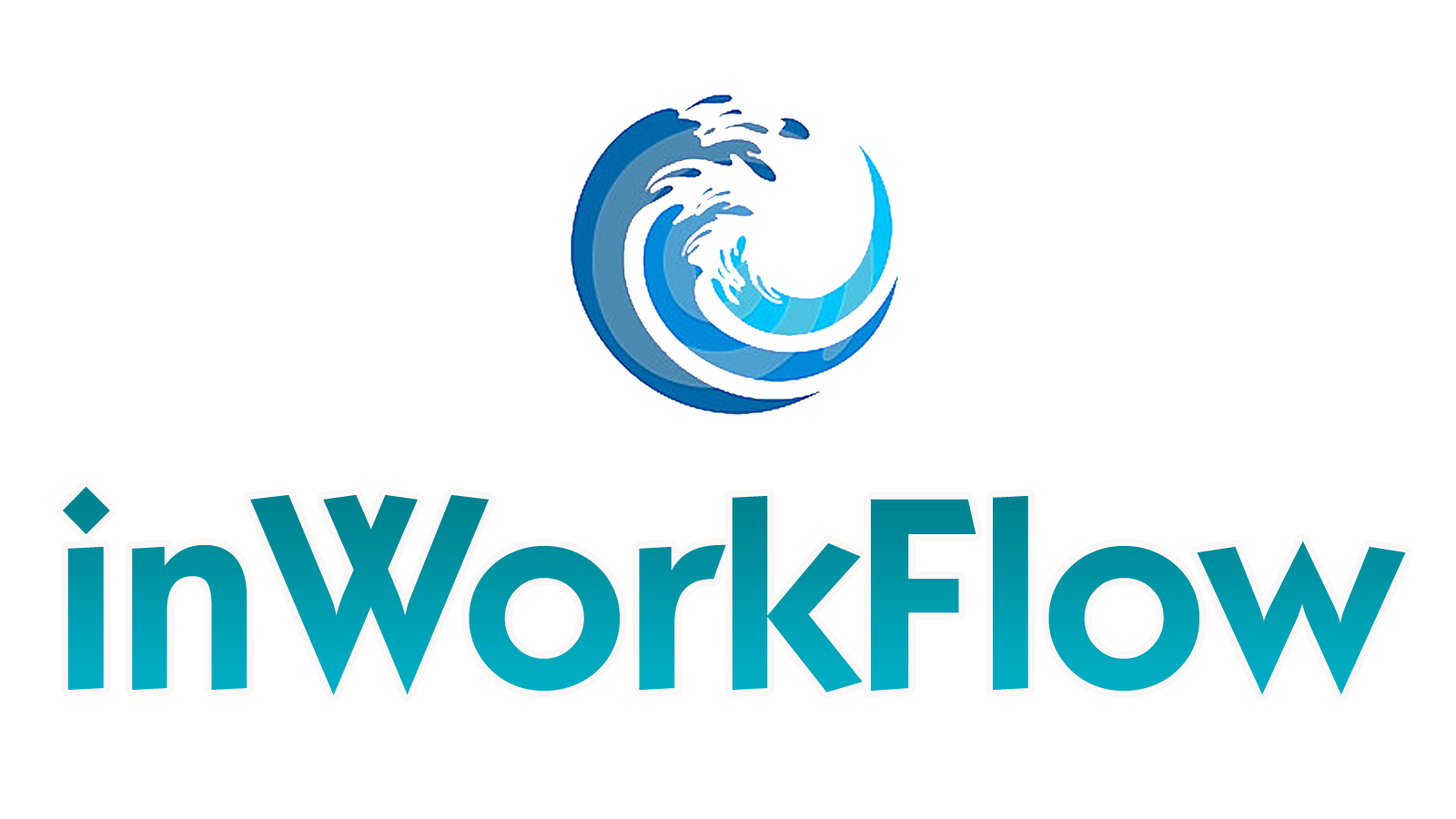
<style>
.page{position:relative;width:1456px;height:819px;background:#ffffff}
.page>*{position:absolute;margin:0}
.t1{font:273px "KabelITCbyBT-Demi";color:#009aad}
</style>
<div class="page">
<p class="t1" style="left:63px;top:486px;width:1343px;height:209px">inWorkFlow</p>
</div>
